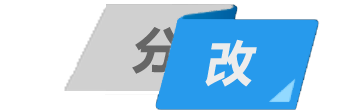
<style>
.page{position:relative;width:350px;height:110px;background:#ffffff}
.page>*{position:absolute;margin:0}
.t1{font:48px "MicrosoftYaHei-Bold";color:#666666;text-transform:uppercase;font-style:italic}
.t2{font:48px "MicrosoftYaHei-Bold";color:#ececec;text-transform:uppercase;font-style:italic}
</style>
<div class="page">
<p class="t1" style="left:132px;top:27px;width:51px;height:47px">分</p>
<p class="t2" style="left:205px;top:39px;width:52px;height:48px">改</p>
</div>
